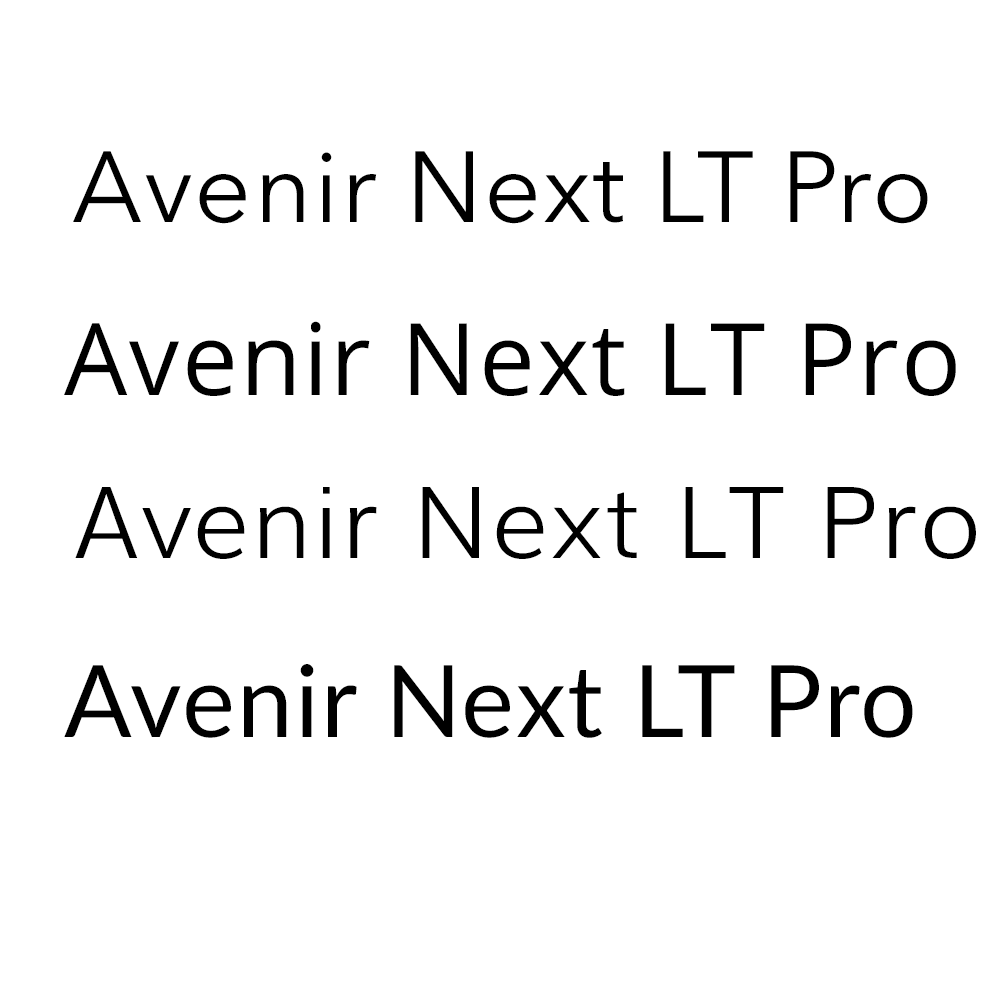
<style>
.page{position:relative;width:1000px;height:1000px;background:#ffffff}
.page>*{position:absolute;margin:0}
.t1{font:100px "AvenirNextLTPro-Regular";letter-spacing:0.02em;color:#000000}
.t2{font:100px "OpenSans";letter-spacing:0.02em;color:#000000}
.t3{font:100px "Muli-Light";letter-spacing:0.02em;color:#000000}
.t4{font:100px "Lato-Regular";letter-spacing:0.02em;color:#000000}
</style>
<div class="page">
<p class="t1" style="left:73px;top:151px;width:855px;height:73px">Avenir Next LT Pro</p>
<p class="t2" style="left:64px;top:321px;width:892px;height:75px">Avenir Next LT Pro</p>
<p class="t3" style="left:75px;top:487px;width:901px;height:72px">Avenir Next LT Pro</p>
<p class="t4" style="left:64px;top:664px;width:849px;height:74px">Avenir Next LT Pro</p>
</div>
